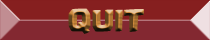
<style>
.page{position:relative;width:210px;height:40px;background:#832831}
.page>*{position:absolute;margin:0}
.t1{font:23.8px "Supercell-Magic";letter-spacing:-0.06em;font-weight:bold}
</style>
<div class="page">
<p class="t1" style="left:68px;top:8px;width:76px;height:26px">QUIT</p>
</div>
